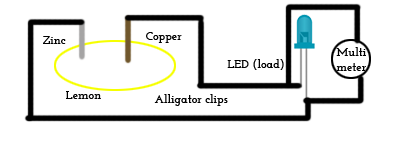
<style>
.page{position:relative;width:400px;height:150px;background:#ffffff}
.page>*{position:absolute;margin:0}
.t1{font:12px "JosefinSlab-Bold";color:#000000}
</style>
<div class="page">
<p class="t1" style="left:43px;top:36px;width:23px;height:8px">Zinc</p>
<p class="t1" style="left:146px;top:32px;width:36px;height:11px">Copper</p>
<p class="t1" style="left:336px;top:47px;width:30px;height:24px;text-align:center">Multi<br>meter</p>
<p class="t1" style="left:227px;top:59px;width:57px;height:11px">LED (load)</p>
<p class="t1" style="left:66px;top:91px;width:35px;height:8px">Lemon</p>
<p class="t1" style="left:154px;top:94px;width:74px;height:12px">Alligator clips</p>
</div>
